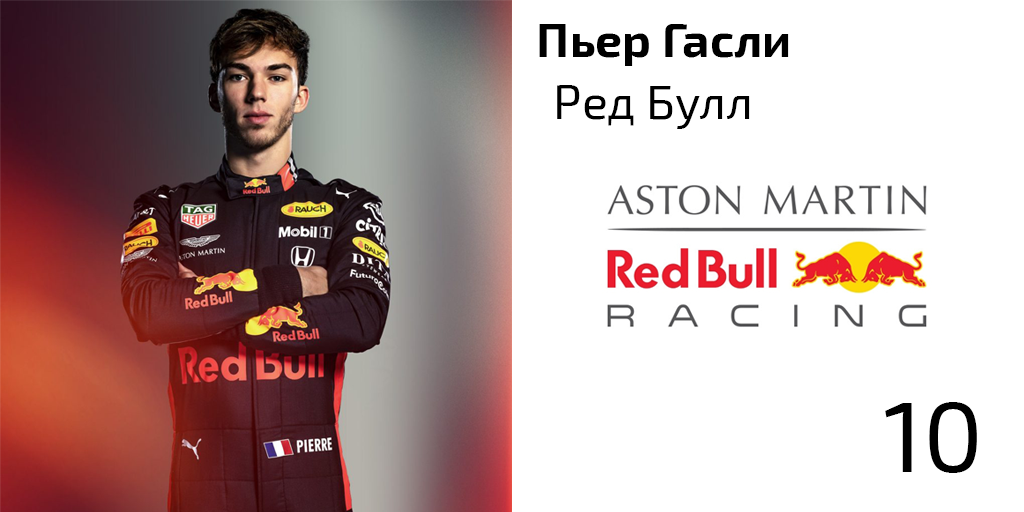
<style>
.page{position:relative;width:1024px;height:512px;background:#ffffff}
.page>*{position:absolute;margin:0}
.t1{font:48px "Exo2-Bold";color:#000000}
.t2{font:48px "Exo2-Regular";color:#000000}
.t3{font:100px "Exo2-Regular";color:#000000}
</style>
<div class="page">
<p class="t1" style="left:539px;top:24px;width:250px;height:42px">Пьер Гасли</p>
<p class="t2" style="left:557px;top:85px;width:193px;height:44px">Ред Булл</p>
<p class="t3" style="left:885px;top:402px;width:92px;height:71px">10</p>
</div>
